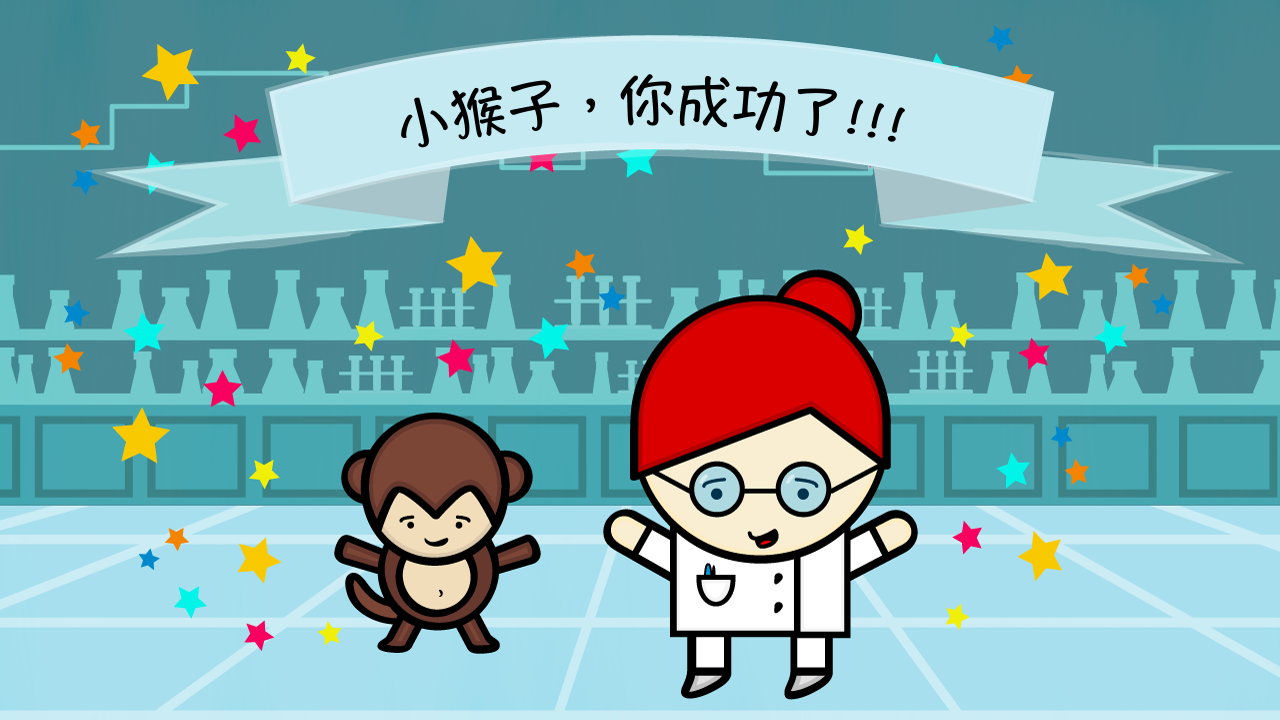
<style>
.page{position:relative;width:1280px;height:720px}
.page>*{position:absolute;margin:0}
.t1{font:54px "HannotateTC-W7";color:#000000}
</style>
<div class="page">
<p class="t1" style="left:401px;top:74px;width:504px;height:74px">小猴子，你成功了!!!</p>
</div>
